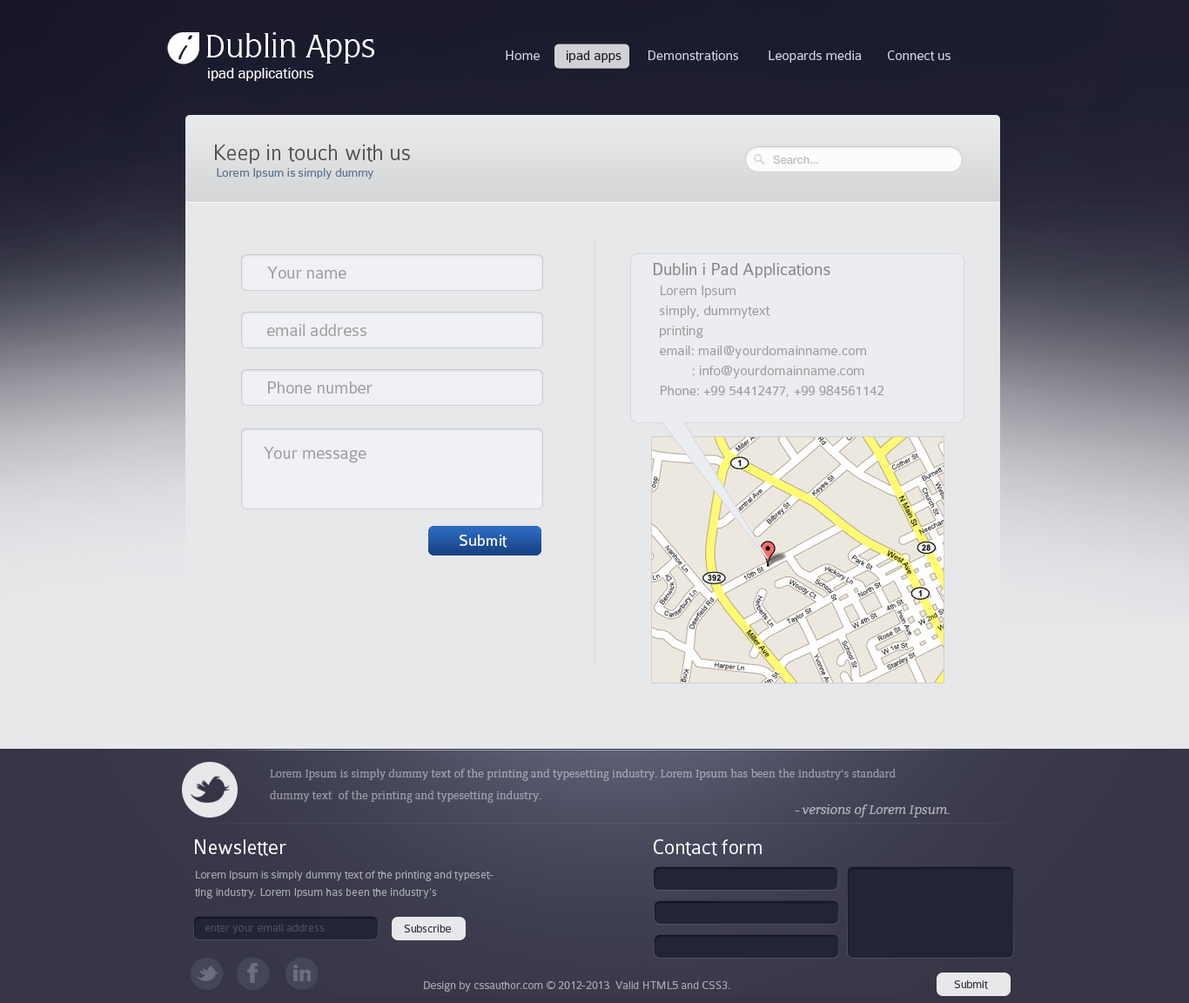
<style>
.page{position:relative;width:1189px;height:1003px;background:#e7e8ea}
.page>*{position:absolute;margin:0}
.t1{font:47.9px "FreeportPlain";color:#1f1f31}
.t2{font:33.9px "FlareLightGothic";color:#ffffff}
.t3{font:14.8px "Colaborate-Light";color:#d7d7e3}
.t4{font:14.8px "Colaborate-Light";color:#161628}
.t5{font:14.8px "FranklinGothic-Book";color:#ffffff}
.t6{font:23.5px "Colaborate-Light";color:#505050}
.t7{font:11.3px "HelveticaNeue-Medium";color:#bfbfbf}
.t8{font:13.1px "Colaborate-Light";color:#5f7390}
.t9{font:18.3px "Colaborate-Light";color:#9d9d9d}
.t10{font:14.8px/20px "Colaborate-Light";color:#9d9d9d}
.t11{font:18.3px/20px "Colaborate-Light";color:#878585}
.t12{font:16.5px "Colaborate-Regular";color:#ffffff}
.t13{font:11.3px/21.8px "Contra";color:#a0a0ab}
.t14{font:13.1px "Contra-Italic";color:#b3b3bb}
.t15{font:21.8px "Colaborate-Light";color:#ffffff}
.t16{font:12.2px/17.4px "Colaborate-Light";color:#a6a6ae}
.t17{font:12.2px "Colaborate-Light";color:#4b4b5c}
.t18{font:12.2px "Colaborate-Light";color:#363648}
.t19{font:12.2px "Colaborate-Light";color:#a6a6ae}
</style>
<div class="page">
<p class="t1" style="left:178px;top:35px;width:14px;height:25px">i</p>
<p class="t2" style="left:206px;top:32px;width:168px;height:32px">Dublin Apps</p>
<p class="t3" style="left:506px;top:50px;width:445px;height:13px">Home      <span class="t4"> ipad apps</span>       Demonstrations        Leopards media       Connect us</p>
<p class="t5" style="left:208px;top:68px;width:105px;height:13px">ipad applications</p>
<p class="t6" style="left:215px;top:145px;width:195px;height:19px">Keep in touch with us</p>
<p class="t7" style="left:773px;top:155px;width:45px;height:10px">Search...</p>
<p class="t8" style="left:217px;top:168px;width:156px;height:11px">Lorem Ipsum is simply dummy</p>
<p class="t9" style="left:267px;top:266px;width:79px;height:13px">Your name</p>
<p class="t10" style="left:654px;top:263px;width:230px;height:134px"><span class="t11">Dublin i Pad Applications<br></span>  Lorem Ipsum<br>  simply, dummytext <br>  printing <br>  email: mail@yourdomainname.com<br>           : info@yourdomainname.com<br>  Phone: +99 54412477, +99 984561142</p>
<p class="t9" style="left:267px;top:324px;width:99px;height:12px">email address</p>
<p class="t9" style="left:268px;top:381px;width:105px;height:12px">Phone number</p>
<p class="t9" style="left:264px;top:447px;width:102px;height:16px">Your message</p>
<p class="t12" style="left:460px;top:534px;width:47px;height:14px">Submit</p>
<p class="t13" style="left:270px;top:769px;width:627px;height:34px">Lorem Ipsum is simply dummy text of the printing and typesetting industry. Lorem Ipsum has been the industry's standard dummy text  of the printing and typesetting industry.</p>
<p class="t14" style="left:795px;top:804px;width:155px;height:13px">- versions of Lorem Ipsum.</p>
<p class="t15" style="left:195px;top:839px;width:91px;height:17px">Newsletter</p>
<p class="t15" style="left:654px;top:839px;width:108px;height:17px">Contact form</p>
<p class="t16" style="left:195px;top:870px;width:299px;height:28px;text-align:justify">Lorem Ipsum is simply dummy text of the printing and typesetting industry. Lorem Ipsum has been the industry's <br>standard dummy text ever sinc</p>
<p class="t17" style="left:205px;top:924px;width:120px;height:10px">enter your email address</p>
<p class="t18" style="left:404px;top:924px;width:47px;height:8px">Subscribe</p>
<p class="t19" style="left:424px;top:981px;width:306px;height:10px">Design by cssauthor.com © 2012-2013  Valid HTML5 and CSS3.</p>
<p class="t18" style="left:954px;top:980px;width:34px;height:9px">Submit</p>
</div>
